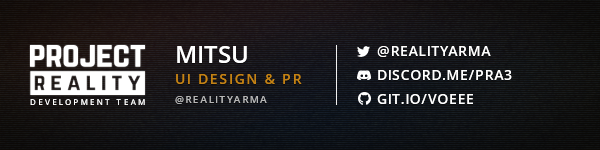
<style>
.page{position:relative;width:600px;height:150px}
.page>*{position:absolute;margin:0}
.t1{font:24px "OpenSans-Semibold";color:#ffffff;text-transform:uppercase}
.t2{font:14px/24px "OpenSans-Semibold";letter-spacing:0.04em;color:#ffffff;text-transform:uppercase}
.t3{font:14px "OpenSans-Semibold";letter-spacing:0.12em;color:#c48214;text-transform:uppercase}
.t4{font:8px "OpenSans-Semibold";letter-spacing:0.28em;color:#ffffff;text-transform:uppercase}
.t5{font:10px "OpenSans-Semibold";letter-spacing:0.12em;color:#b7b7b7;text-transform:uppercase}
</style>
<div class="page">
<p class="t1" style="left:177px;top:46px;width:70px;height:17px">Mitsu</p>
<p class="t2" style="left:377px;top:46px;width:135px;height:58px">@realityarma<br>discord.me/pra3<br>git.io/voeEE</p>
<p class="t3" style="left:176px;top:74px;width:126px;height:10px">UI Design &amp; PR</p>
<p class="t4" style="left:30px;top:99px;width:115px;height:6px">development team</p>
<p class="t5" style="left:175px;top:96px;width:92px;height:8px">@realityarma</p>
</div>
